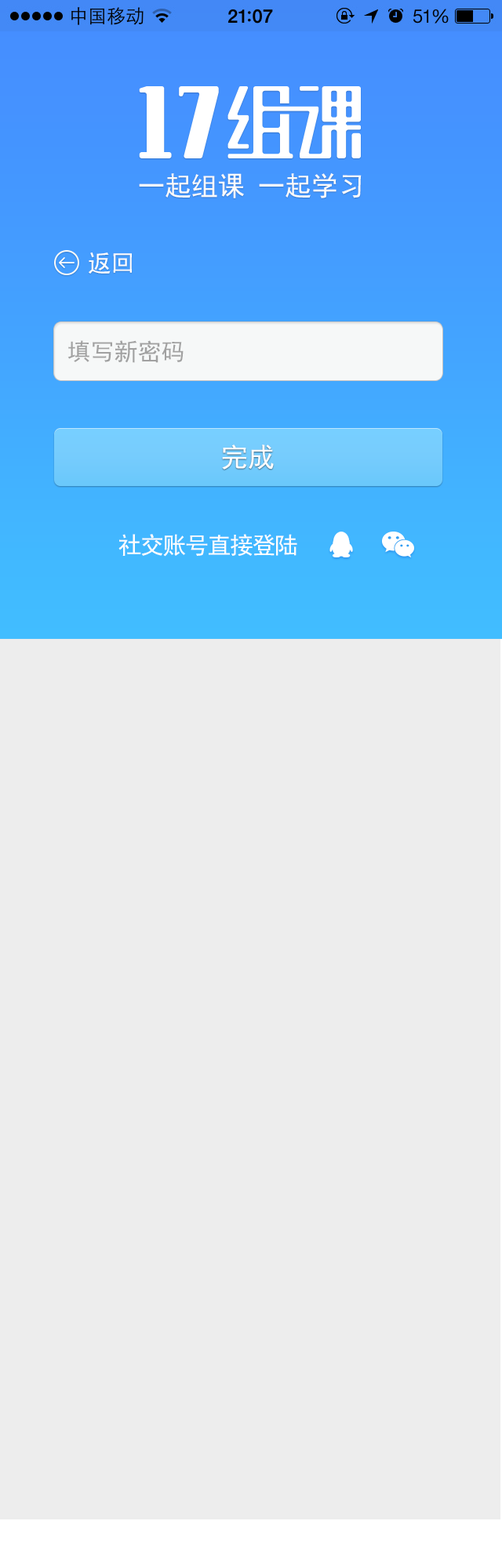
<style>
.page{position:relative;width:502px;height:1568px;background:#ededed}
.page>*{position:absolute;margin:0}
.t1{font:26.7px "SimHei";color:#fbfbfb}
.t2{font:23.5px "SimHei";color:#fefefe}
.t3{font:23.5px "SimHei";color:#a1a1a1}
.t4{font:26.7px "SimHei";color:#fefefe}
.t5{font:23.5px "SimHei";letter-spacing:-0.05em;color:#fefefe}
</style>
<div class="page">
<p class="t1" style="left:139px;top:172px;width:222px;height:26px">一起组课 一起学习</p>
<p class="t2" style="left:89px;top:252px;width:43px;height:22px">返回</p>
<p class="t3" style="left:67px;top:340px;width:116px;height:23px">填写新密码</p>
<p class="t4" style="left:222px;top:445px;width:52px;height:25px">完成</p>
<p class="t5" style="left:118px;top:534px;width:179px;height:23px">社交账号直接登陆</p>
</div>
